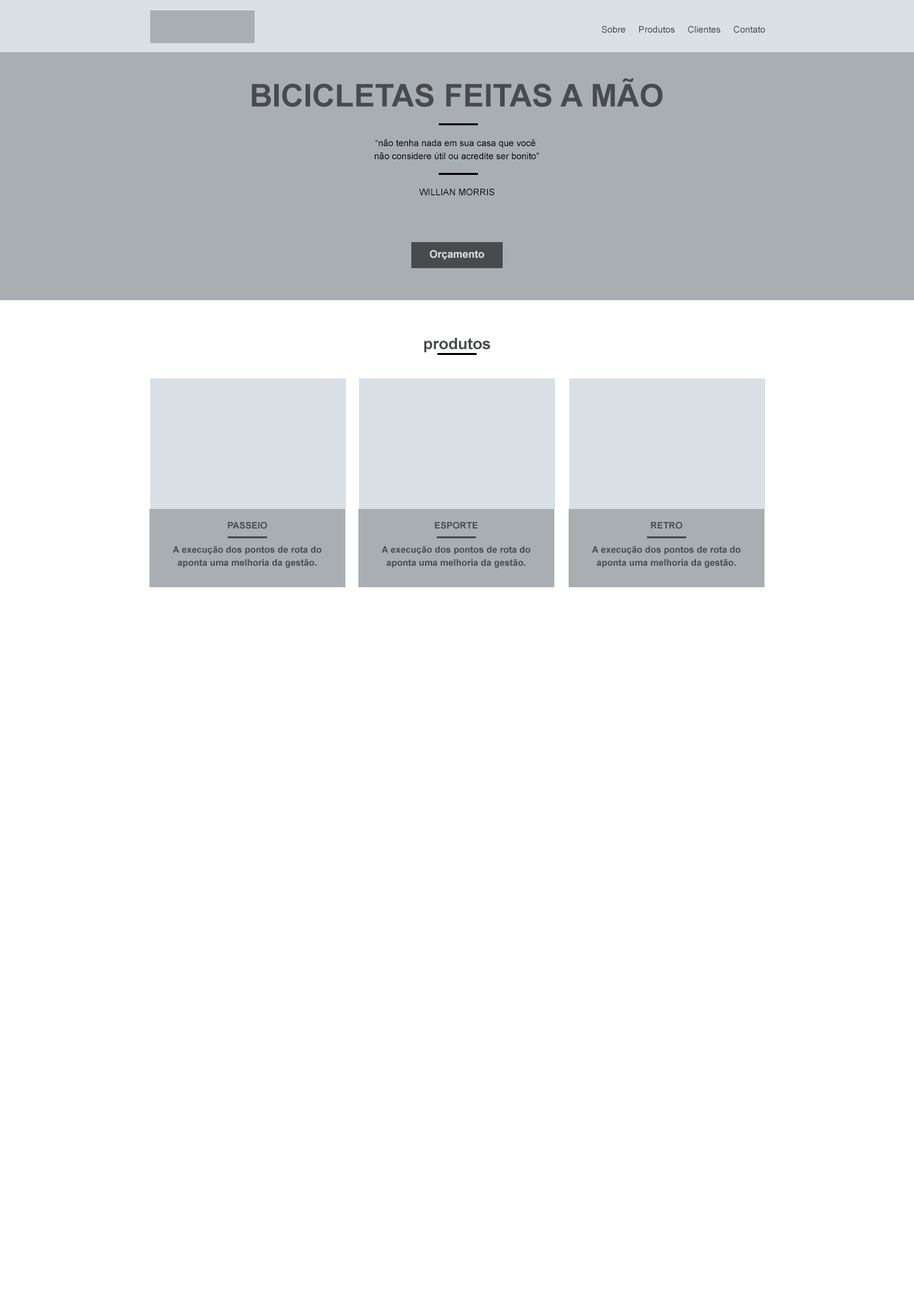
<style>
.page{position:relative;width:914px;height:1305px;background:#ffffff}
.page>*{position:absolute;margin:0}
.t1{font:9.1px "ArialMT";color:#484b4d}
.t2{font:31.3px "Arial-BoldMT";color:#484b4d;text-transform:uppercase}
.t3{font:9.1px/13.1px "ArialMT";color:#000000}
.t4{font:9.1px "ArialMT";color:#000000;text-transform:uppercase}
.t5{font:10.4px "Arial-BoldMT";color:#d9e0e6}
.t6{font:15.7px "Arial-BoldMT";color:#484b4d}
.t7{font:9.1px "Arial-BoldMT";color:#484b4d;text-transform:uppercase}
.t8{font:9.1px/13.1px "Arial-BoldMT";color:#484b4d}
</style>
<div class="page">
<p class="t1" style="left:601px;top:25px;width:164px;height:8px">Sobre     Produtos     Clientes     Contato</p>
<p class="t2" style="left:251px;top:78px;width:411px;height:29px">Bicicletas Feitas a Mão</p>
<p class="t3" style="left:375px;top:139px;width:164px;height:20px;text-align:center">“não tenha nada em sua casa que você <br>não considere útil ou acredite ser bonito”</p>
<p class="t4" style="left:419px;top:189px;width:75px;height:7px">willian morris</p>
<p class="t5" style="left:429px;top:250px;width:55px;height:10px">Orçamento</p>
<p class="t6" style="left:424px;top:337px;width:66px;height:15px">produtos</p>
<p class="t7" style="left:228px;top:521px;width:39px;height:8px">passeio</p>
<p class="t7" style="left:435px;top:521px;width:43px;height:8px">Esporte</p>
<p class="t7" style="left:651px;top:521px;width:31px;height:8px">retro</p>
<p class="t8" style="left:172px;top:546px;width:150px;height:22px;text-align:center">A execução dos pontos de rota do aponta uma melhoria da gestão.</p>
<p class="t8" style="left:381px;top:546px;width:150px;height:22px;text-align:center">A execução dos pontos de rota do aponta uma melhoria da gestão.</p>
<p class="t8" style="left:591px;top:546px;width:150px;height:22px;text-align:center">A execução dos pontos de rota do aponta uma melhoria da gestão.</p>
</div>
